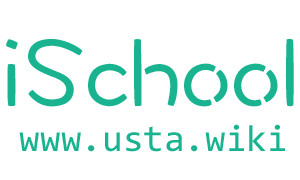
<style>
.page{position:relative;width:300px;height:180px;background:#ffffff}
.page>*{position:absolute;margin:0}
.t1{font:100px "DFWaWaSC-W5";color:#1ab390}
.t2{font:37.5px "Consolas";color:#1ab390}
</style>
<div class="page">
<p class="t1" style="left:6px;top:39px;width:288px;height:68px">iSchool</p>
<p class="t2" style="left:19px;top:124px;width:266px;height:28px">www.usta.wiki</p>
</div>
